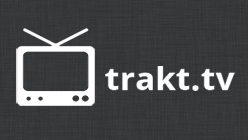
<style>
.page{position:relative;width:248px;height:140px}
.page>*{position:absolute;margin:0}
.t1{font:32px "DroidSans-Bold";color:#ffffff;scale:1.11 1}
</style>
<div class="page">
<p class="t1" style="left:105px;top:66px;width:130px;height:25px">trakt.tv</p>
</div>
